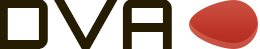
<style>
.page{position:relative;width:260px;height:49px;background:#ffffff}
.page>*{position:absolute;margin:0}
.t1{font:68.8px "Orbitron-Bold";letter-spacing:0.02em;color:#261c02;text-transform:uppercase}
</style>
<div class="page">
<p class="t1" style="left:0px;top:0px;width:172px;height:49px">DVA</p>
</div>
